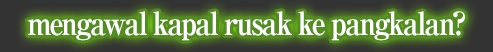
<style>
.page{position:relative;width:493px;height:52px}
.page>*{position:absolute;margin:0}
.t1{font:32px "RyuminPro-ExBold";letter-spacing:-0.08em;color:#ffffff;scale:0.9 1}
</style>
<div class="page">
<p class="t1" style="left:27px;top:11px;width:438px;height:30px">mengawal kapal rusak ke pangkalan?</p>
</div>
